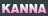
<style>
.page{position:relative;width:48px;height:16px;background:#314242}
.page>*{position:absolute;margin:0}
.t1{font:12px "Arial-Black";scale:0.93 1}
</style>
<div class="page">
<p class="t1" style="left:2px;top:4px;width:45px;height:9px">KANNA</p>
</div>
